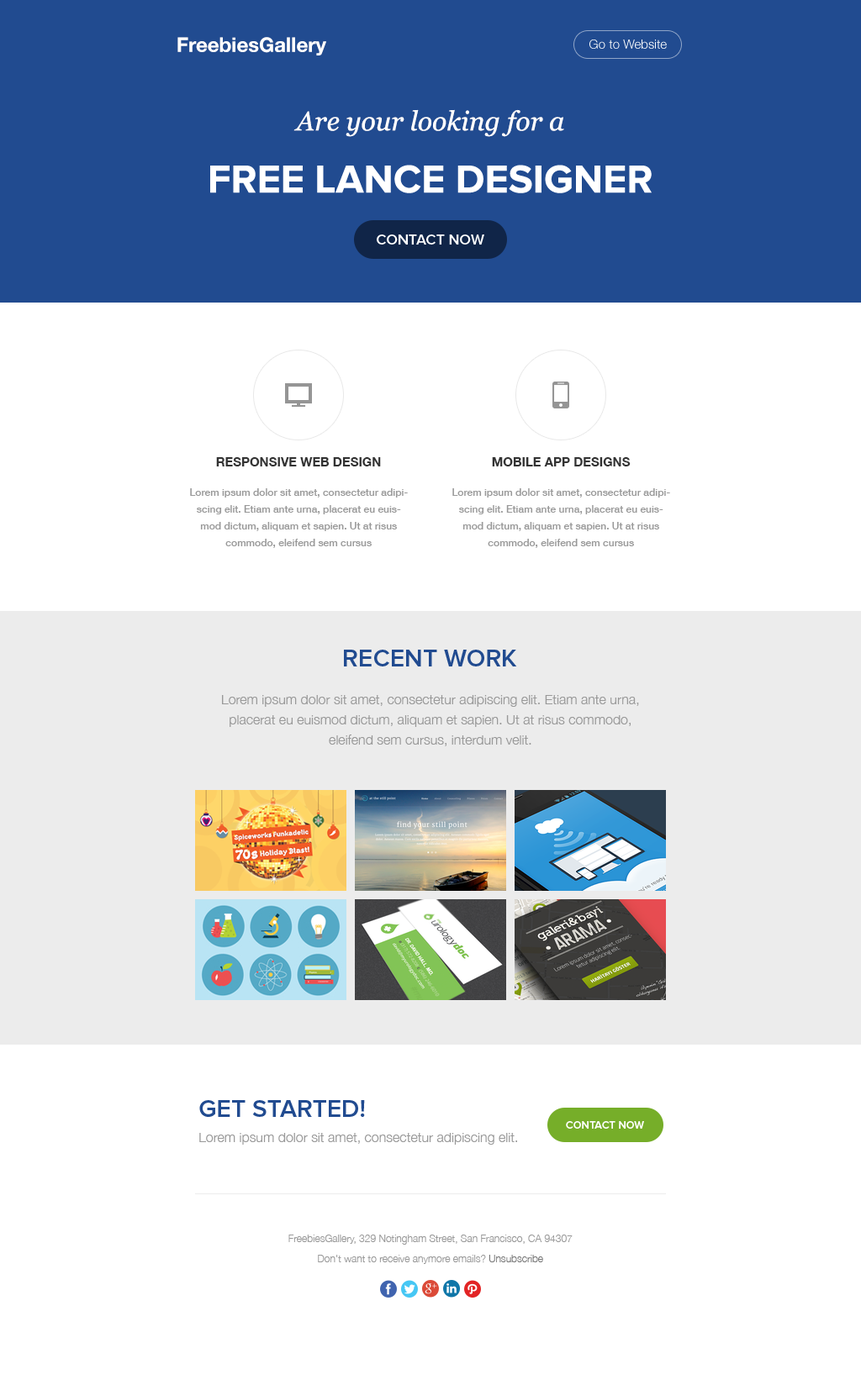
<style>
.page{position:relative;width:861px;height:1385px;background:#ffffff}
.page>*{position:absolute;margin:0}
.t1{font:20.2px "HelveticaNeue-Bold";color:#ffffff}
.t2{font:12.6px "HelveticaNeue-Light";color:#ffffff}
.t3{font:26.9px "Georgia-Italic";color:#ffffff}
.t4{font:40.3px "ProximaNova-Bold";color:#ffffff}
.t5{font:15.1px "ProximaNova-Semibold";color:#fefefe;text-transform:uppercase}
.t6{font:12.6px "HelveticaNeue-Bold";color:#333333;text-transform:uppercase}
.t7{font:10.1px/16.8px "HelveticaNeue-Medium";color:#999999}
.t8{font:25.2px "ProximaNova-Semibold";color:#214b90;text-transform:uppercase}
.t9{font:13.4px/20.2px "HelveticaNeue-Light";color:#999999}
.t10{font:10.9px "ProximaNova-Semibold";color:#fefefe;text-transform:uppercase}
.t11{font:13.4px "HelveticaNeue-Light";color:#999999}
.t12{font:10.1px/20.2px "HelveticaNeue-Light";color:#999999}
.t13{font:10.1px/20.2px "HelveticaNeue-Light";color:#787878}
</style>
<div class="page">
<p class="t1" style="left:177px;top:37px;width:149px;height:18px">FreebiesGallery</p>
<p class="t2" style="left:589px;top:40px;width:78px;height:9px">Go to Website</p>
<p class="t3" style="left:293px;top:109px;width:271px;height:28px">Are your looking for a</p>
<p class="t4" style="left:210px;top:165px;width:441px;height:28px">FREE LANCE DESIGNER</p>
<p class="t5" style="left:377px;top:235px;width:107px;height:10px">CONTACT NOW</p>
<p class="t6" style="left:216px;top:457px;width:165px;height:10px">RESPONSIVE WEB DESIGN</p>
<p class="t6" style="left:492px;top:457px;width:138px;height:10px">MOBILE APP DESIGNS</p>
<p class="t7" style="left:190px;top:488px;width:218px;height:60px;text-align:center">Lorem ipsum dolor sit amet, consectetur adipiscing elit. Etiam ante urna, placerat eu euismod dictum, aliquam et sapien. Ut at risus commodo, eleifend sem cursus</p>
<p class="t7" style="left:452px;top:488px;width:218px;height:60px;text-align:center">Lorem ipsum dolor sit amet, consectetur adipiscing elit. Etiam ante urna, placerat eu euismod dictum, aliquam et sapien. Ut at risus commodo, eleifend sem cursus</p>
<p class="t8" style="left:344px;top:650px;width:173px;height:17px">RECENT WORK</p>
<p class="t9" style="left:222px;top:695px;width:417px;height:51px;text-align:center">Lorem ipsum dolor sit amet, consectetur adipiscing elit. Etiam ante urna, placerat eu euismod dictum, aliquam et sapien. Ut at risus commodo, eleifend sem cursus, interdum velit.</p>
<p class="t8" style="left:199px;top:1100px;width:166px;height:17px">get started!</p>
<p class="t10" style="left:566px;top:1121px;width:78px;height:8px">contact now</p>
<p class="t11" style="left:199px;top:1133px;width:318px;height:12px">Lorem ipsum dolor sit amet, consectetur adipiscing elit.</p>
<p class="t12" style="left:288px;top:1235px;width:284px;height:29px;text-align:center">FreebiesGallery, 329 Notingham Street, San Francisco, CA 94307<br>Don't want to receive anymore emails? <span class="t13">Unsubscribe</span></p>
</div>
